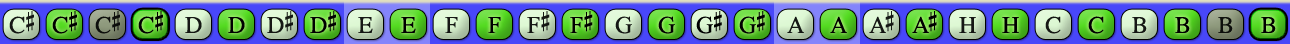
<style>
.page{position:relative;width:1290px;height:44px}
.page>*{position:absolute;margin:0}
.t1{font:24px "OpusChords";color:#000000}
.t2{font:24px "OpusChords";letter-spacing:-0.025em;color:#000000}
.t3{font:24px "OpusChords";letter-spacing:-0.1em;color:#000000}
</style>
<div class="page">
<p class="t1" style="left:9px;top:11px;width:25px;height:23px;opacity:0.9">C#</p>
<p class="t1" style="left:52px;top:11px;width:25px;height:23px">C#</p>
<p class="t1" style="left:95px;top:11px;width:25px;height:23px;opacity:0.9">C#</p>
<p class="t1" style="left:138px;top:11px;width:25px;height:23px">C#</p>
<p class="t1" style="left:185px;top:17px;width:17px;height:16px;opacity:0.9">D</p>
<p class="t1" style="left:228px;top:17px;width:17px;height:16px">D</p>
<p class="t2" style="left:267px;top:11px;width:26px;height:22px;opacity:0.9">D#</p>
<p class="t2" style="left:310px;top:11px;width:26px;height:22px">D#</p>
<p class="t1" style="left:358px;top:17px;width:15px;height:16px;opacity:0.9">E</p>
<p class="t1" style="left:401px;top:17px;width:15px;height:16px">E</p>
<p class="t1" style="left:445px;top:17px;width:13px;height:16px;opacity:0.9">F</p>
<p class="t1" style="left:488px;top:17px;width:13px;height:16px">F</p>
<p class="t1" style="left:527px;top:11px;width:23px;height:22px;opacity:0.9">F#</p>
<p class="t1" style="left:570px;top:11px;width:23px;height:22px">F#</p>
<p class="t1" style="left:615px;top:16px;width:17px;height:18px;opacity:0.9">G</p>
<p class="t1" style="left:658px;top:16px;width:17px;height:18px">G</p>
<p class="t2" style="left:696px;top:11px;width:26px;height:23px">G#</p>
<p class="t2" style="left:739px;top:11px;width:26px;height:23px">G#</p>
<p class="t1" style="left:787px;top:16px;width:17px;height:17px;opacity:0.9">A</p>
<p class="t1" style="left:830px;top:16px;width:17px;height:17px">A</p>
<p class="t3" style="left:869px;top:11px;width:25px;height:22px;opacity:0.9">A#</p>
<p class="t3" style="left:912px;top:11px;width:25px;height:22px">A#</p>
<p class="t1" style="left:959px;top:17px;width:17px;height:16px;opacity:0.9">H</p>
<p class="t1" style="left:1002px;top:17px;width:17px;height:16px">H</p>
<p class="t1" style="left:1045px;top:16px;width:16px;height:18px;opacity:0.9">C</p>
<p class="t1" style="left:1088px;top:16px;width:16px;height:18px">C</p>
<p class="t1" style="left:1132px;top:17px;width:15px;height:16px;opacity:0.9">B</p>
<p class="t1" style="left:1175px;top:17px;width:15px;height:16px">B</p>
<p class="t1" style="left:1218px;top:17px;width:15px;height:16px;opacity:0.9">B</p>
<p class="t1" style="left:1261px;top:17px;width:15px;height:16px">B</p>
</div>
